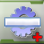
<style>
.page{position:relative;width:44px;height:44px}
.page>*{position:absolute;margin:0}
.t1{font:18px "Arial-BoldMT";letter-spacing:0.025em;color:#ed0000}
</style>
<div class="page">
<p class="t1" style="left:33px;top:32px;width:9px;height:10px;rotate:90deg">+</p>
</div>
